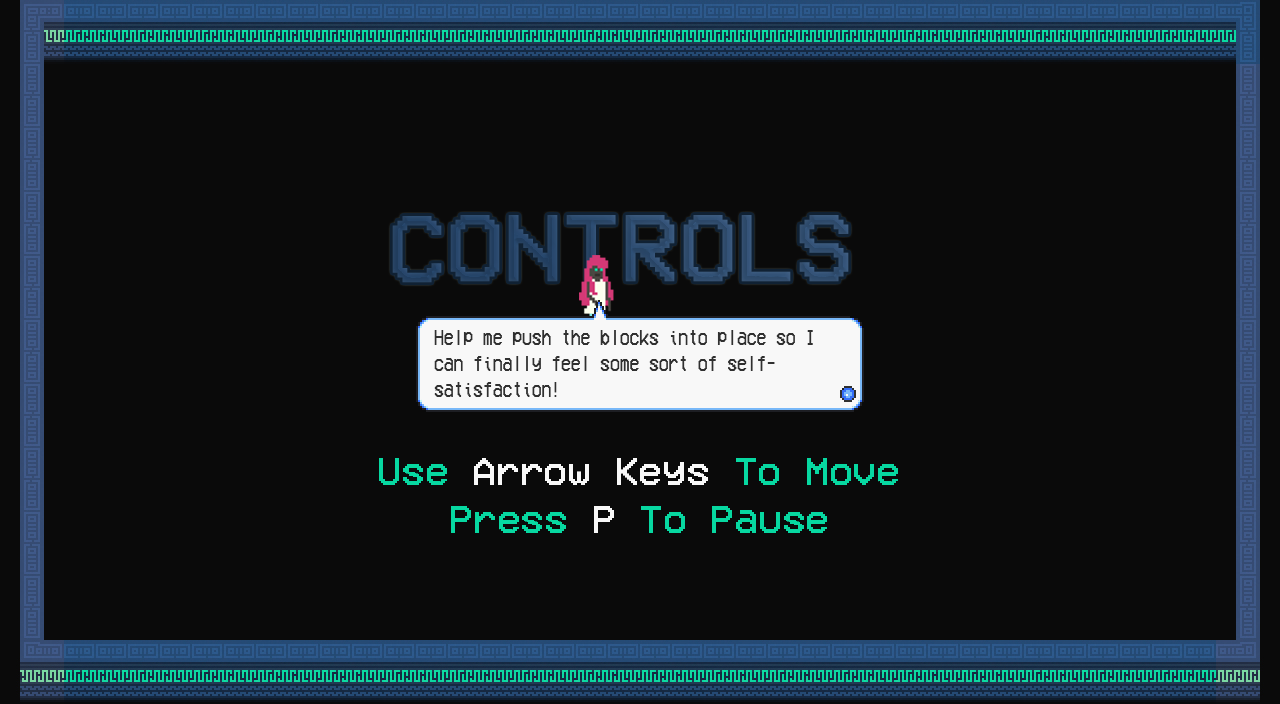
<style>
.page{position:relative;width:1280px;height:704px;background:#0a0a0a}
.page>*{position:absolute;margin:0}
.t1{font:72.7px "VCROSDMono";color:#284b73}
.t2{font:16.3px "VCROSDMono";color:#303030;scale:0.77 1}
.t3{font:29.6px "VCROSDMono";color:#f8f8f8}
.t4{font:29.6px "VCROSDMono";color:#07d8a1}
</style>
<div class="page">
<p class="t1" style="left:392px;top:215px;width:457px;height:68px">CONTROLS</p>
<p class="t2" style="left:434px;top:330px;width:379px;height:67px">Help me push the blocks into place so I<br>can finally feel some sort of self-<br>satisfaction!</p>
<p class="t3" style="left:379px;top:458px;width:519px;height:27px"><span class="t4">Use </span>Arrow Keys<span class="t4"> To Move</span></p>
<p class="t4" style="left:451px;top:506px;width:376px;height:27px">Press <span class="t3">P</span> To Pause</p>
</div>
